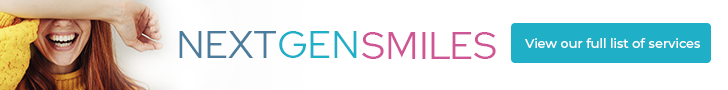
<style>
.page{position:relative;width:728px;height:90px;background:#ffffff}
.page>*{position:absolute;margin:0}
.t1{font:38.6px "RedHatText-Regular";color:#4b7c9c}
.t2{font:38.6px "RedHatText-Regular";color:#1fb0c8}
.t3{font:38.6px "RedHatText-Regular";color:#cf5695}
.t4{font:12.8px "Montserrat-Medium";color:#ffffff}
</style>
<div class="page">
<p class="t1" style="left:179px;top:31px;width:97px;height:27px">NEXT</p>
<p class="t2" style="left:279px;top:31px;width:78px;height:27px">GEN</p>
<p class="t3" style="left:362px;top:32px;width:134px;height:27px">SMILES</p>
<p class="t4" style="left:525px;top:38px;width:175px;height:10px">View our full list of services</p>
</div>
